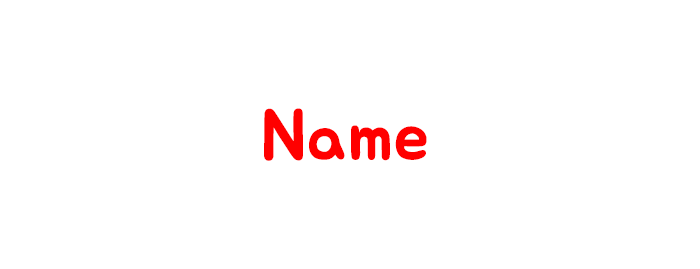
<style>
.page{position:relative;width:700px;height:269px;background:#ffffff}
.page>*{position:absolute;margin:0}
.t1{font:72px "BMJUA";color:#ff0000}
</style>
<div class="page">
<p class="t1" style="left:264px;top:108px;width:163px;height:53px">Name</p>
</div>
